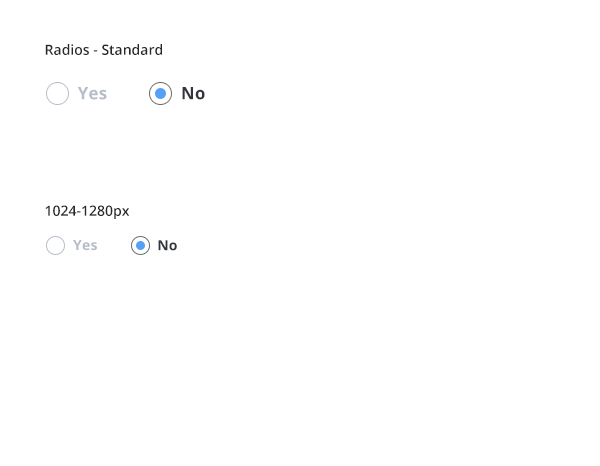
<style>
.page{position:relative;width:600px;height:466px;background:#ffffff}
.page>*{position:absolute;margin:0}
.t1{font:14px "OpenSans-Semibold";color:#282828}
.t2{font:17px "OpenSans-Bold";letter-spacing:0.015em;color:#b5bdc9}
.t3{font:17px "OpenSans-Bold";letter-spacing:0.015em;color:#32353b}
.t4{font:14px "OpenSans-Bold";letter-spacing:0.015em;color:#b5bdc9}
.t5{font:14px "OpenSans-Bold";letter-spacing:0.015em;color:#32353b}
</style>
<div class="page">
<p class="t1" style="left:45px;top:44px;width:117px;height:11px">Radios - Standard</p>
<p class="t2" style="left:77px;top:87px;width:30px;height:13px">Yes</p>
<p class="t3" style="left:182px;top:87px;width:23px;height:13px">No</p>
<p class="t1" style="left:45px;top:205px;width:85px;height:14px">1024-1280px</p>
<p class="t4" style="left:73px;top:240px;width:24px;height:11px">Yes</p>
<p class="t5" style="left:158px;top:240px;width:19px;height:11px">No</p>
</div>
